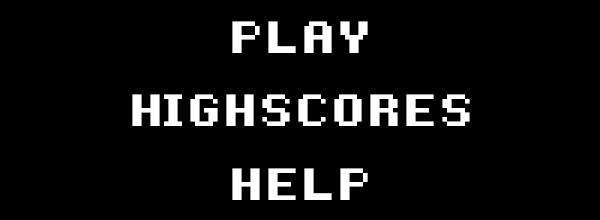
<style>
.page{position:relative;width:600px;height:220px;background:#000000}
.page>*{position:absolute;margin:0}
.t1{font:72px "8-Bit-Madness";color:#ffffff}
</style>
<div class="page">
<p class="t1" style="left:232px;top:21px;width:136px;height:32px">PLAY</p>
<p class="t1" style="left:132px;top:94px;width:338px;height:32px">HIGHSCORES</p>
<p class="t1" style="left:232px;top:168px;width:136px;height:32px">HELP</p>
</div>
